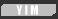
<style>
.page{position:relative;width:58px;height:19px;background:#bfbfbf}
.page>*{position:absolute;margin:0}
.t1{font:12px "Impact";letter-spacing:0.2em;color:#ffffff}
</style>
<div class="page">
<p class="t1" style="left:16px;top:5px;width:22px;height:10px">YIM</p>
</div>
